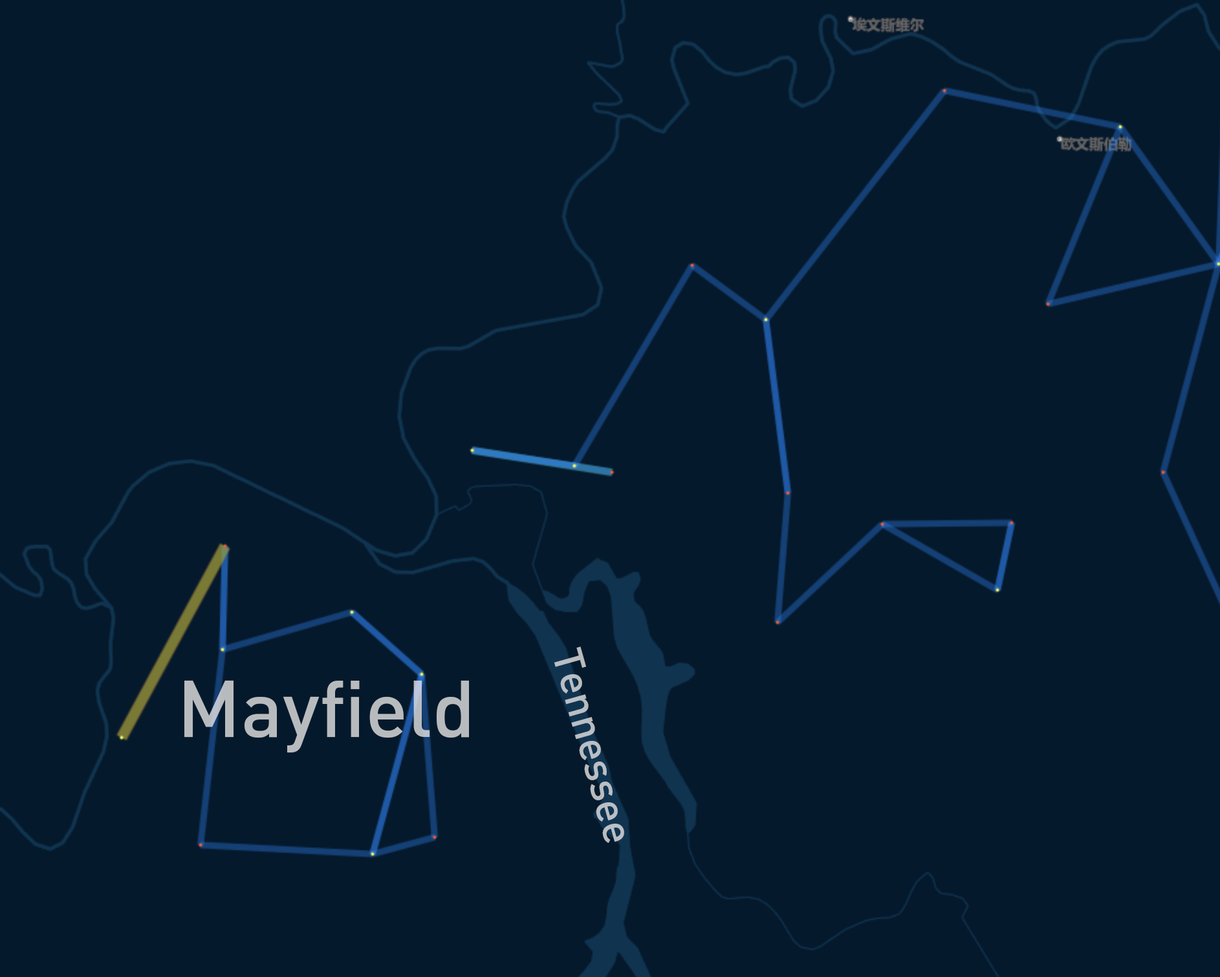
<style>
.page{position:relative;width:1220px;height:977px;background:#05192c}
.page>*{position:absolute;margin:0}
.t1{font:41.4px "DIN-Medium";color:#babfc5}
.t2{font:78.3px "DIN-Medium";color:#b8bbbe}
</style>
<div class="page">
<p class="t1" style="left:555px;top:646px;width:69px;height:197px;rotate:74deg">Tennessee</p>
<p class="t2" style="left:184px;top:680px;width:285px;height:73px">Mayfield</p>
</div>
